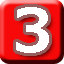
<style>
.page{position:relative;width:64px;height:64px;background:#f70909}
.page>*{position:absolute;margin:0}
.t1{font:60px "Meiryo-Bold";color:#ffffff}
</style>
<div class="page">
<p class="t1" style="left:16px;top:7px;width:33px;height:46px">3</p>
</div>
